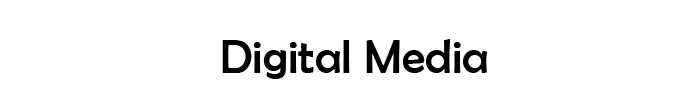
<style>
.page{position:relative;width:700px;height:100px;background:#ffffff}
.page>*{position:absolute;margin:0}
.t1{font:48px "BerlinSansFB-Reg";color:#000000}
</style>
<div class="page">
<p class="t1" style="left:222px;top:39px;width:266px;height:40px">Digital Media</p>
</div>
